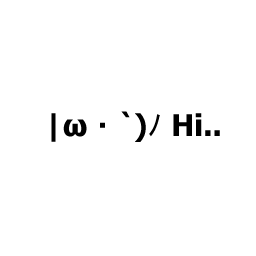
<style>
.page{position:relative;width:256px;height:256px;background:#ffffff}
.page>*{position:absolute;margin:0}
.t1{font:30px "Tahoma-Bold";color:#000000}
.t2{font:30px "MS-Gothic";color:#000000}
</style>
<div class="page">
<p class="t1" style="left:51px;top:111px;width:169px;height:31px">|ω<span class="t2">・</span>`)<span class="t2">ﾉ</span> Hi..</p>
</div>
